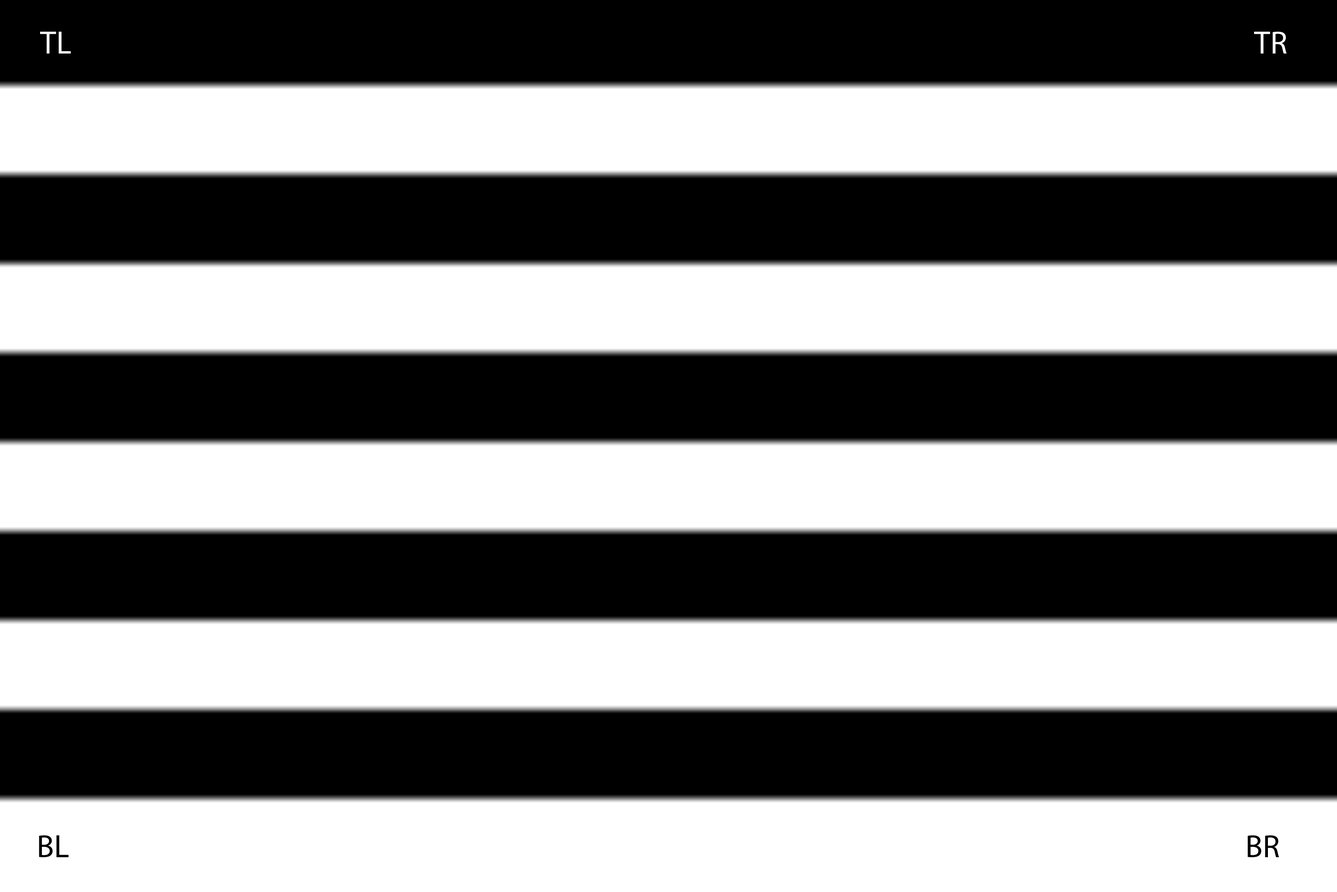
<style>
.page{position:relative;width:1337px;height:892px;background:#ffffff}
.page>*{position:absolute;margin:0}
.t1{font:32.1px "MyriadPro-Regular";color:#ffffff}
.t2{font:32.1px "MyriadPro-Regular";color:#000000}
</style>
<div class="page">
<p class="t1" style="left:40px;top:32px;width:31px;height:21px">TL</p>
<p class="t1" style="left:1254px;top:32px;width:33px;height:21px">TR</p>
<p class="t2" style="left:39px;top:835px;width:30px;height:22px">BL</p>
<p class="t2" style="left:1248px;top:835px;width:31px;height:22px">BR</p>
</div>
